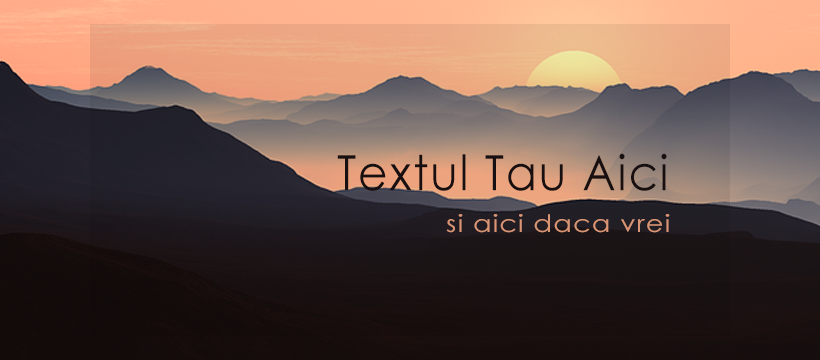
<style>
.page{position:relative;width:820px;height:360px}
.page>*{position:absolute;margin:0}
.t1{font:48.9px "CenturyGothic";letter-spacing:0.04em;color:#191011;scale:0.93 1}
.t2{font:24px "CenturyGothic";letter-spacing:0.04em;color:#eba17d;scale:1.14 1}
</style>
<div class="page">
<p class="t1" style="left:337px;top:153px;width:330px;height:38px">Textul Tau Aici</p>
<p class="t2" style="left:446px;top:214px;width:224px;height:19px">si aici daca vrei</p>
</div>
